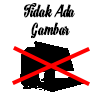
<style>
.page{position:relative;width:100px;height:100px;background:#ffffff}
.page>*{position:absolute;margin:0}
.t1{font:15.2px/17.8px "BonbonRegular";color:#000000;font-weight:bold;scale:0.91 1}
</style>
<div class="page">
<p class="t1" style="left:24px;top:3px;width:51px;height:36px;text-align:center">Tidak Ada <br>Gambar</p>
</div>
